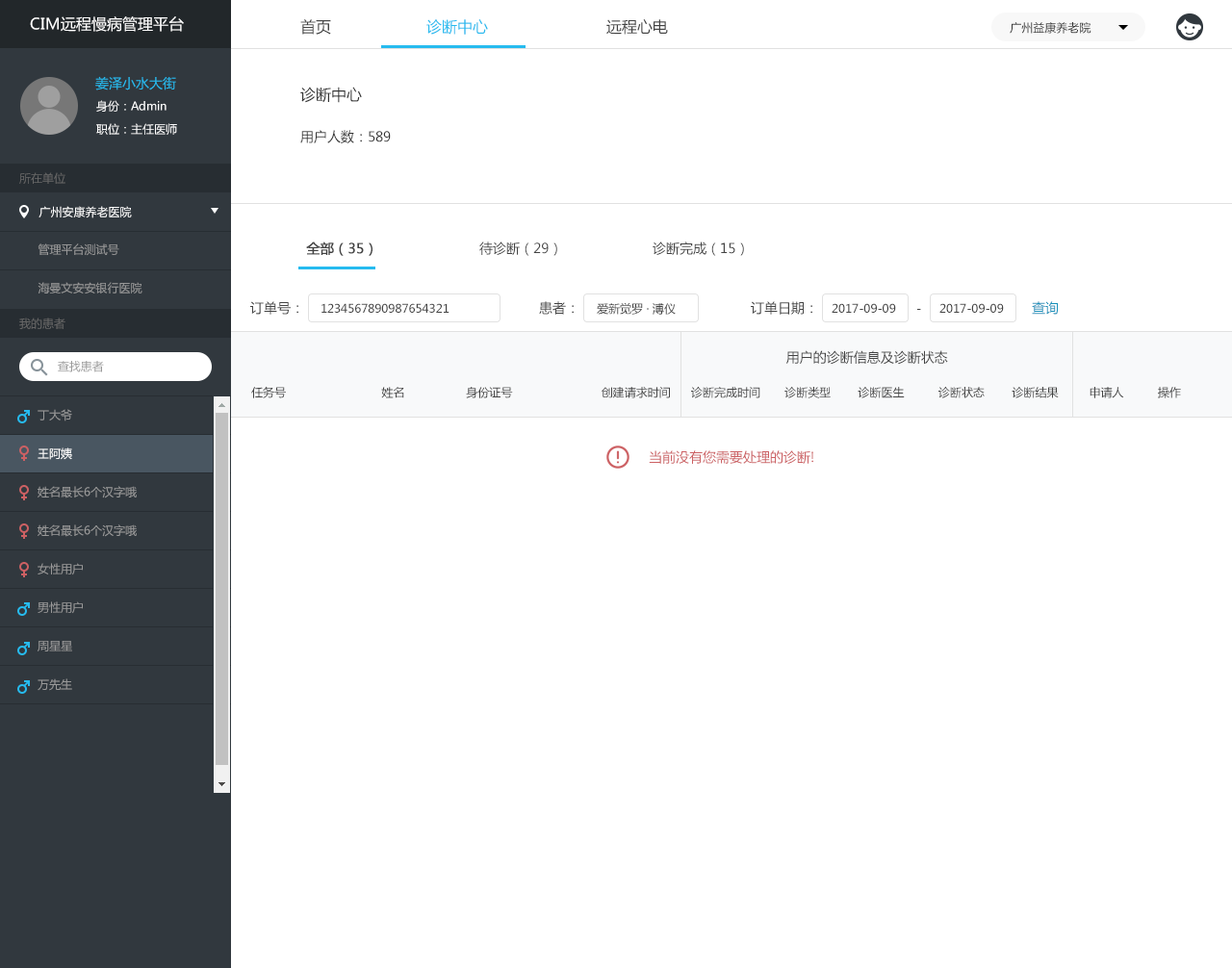
<style>
.page{position:relative;width:1232px;height:968px;background:#ffffff}
.page>*{position:absolute;margin:0}
.t1{font:15.4px "MicrosoftYaHei";color:#ffffff}
.t2{font:15.4px "MicrosoftYaHei";color:#434343}
.t3{font:15.4px "MicrosoftYaHei";color:#26bbef}
.t4{font:11.5px "MicrosoftYaHei";color:#333333}
.t5{font:13.5px "MicrosoftYaHei";color:#26bbef}
.t6{font:15.4px "MicrosoftYaHei";color:#333333}
.t7{font:11.5px "MicrosoftYaHei";color:#ffffff}
.t8{font:13.5px "MicrosoftYaHei";color:#333333}
.t9{font:11.5px "MicrosoftYaHei";color:#666666}
.t10{font:11.5px "MicrosoftYaHei";color:#999999}
.t11{font:13.5px "MicrosoftYaHei";color:#434343}
.t12{font:13.5px "MicrosoftYaHei";color:#434343;font-weight:bold}
.t13{font:11.5px "MicrosoftYaHei";color:#434343}
.t14{font:13.5px "MicrosoftYaHei";color:#1790ba}
.t15{font:11.5px/19.2px "MicrosoftYaHei";color:#999999}
.t16{font:11.5px/19.2px "MicrosoftYaHei";color:#ffffff}
.t17{font:13.5px "MicrosoftYaHei";color:#cc6063}
</style>
<div class="page">
<p class="t1" style="left:30px;top:16px;width:154px;height:16px">CIM远程慢病管理平台</p>
<p class="t2" style="left:300px;top:19px;width:31px;height:16px">首页</p>
<p class="t3" style="left:426px;top:19px;width:62px;height:16px">诊断中心</p>
<p class="t2" style="left:606px;top:19px;width:62px;height:16px">远程心电</p>
<p class="t4" style="left:1009px;top:22px;width:82px;height:12px">广州益康养老院</p>
<p class="t5" style="left:95px;top:76px;width:81px;height:14px">姜泽小水大街</p>
<p class="t6" style="left:300px;top:87px;width:62px;height:16px">诊断中心</p>
<p class="t7" style="left:96px;top:100px;width:70px;height:12px">身份：Admin</p>
<p class="t7" style="left:96px;top:123px;width:81px;height:12px">职位：主任医师</p>
<p class="t8" style="left:300px;top:130px;width:91px;height:13px">用户人数：589</p>
<p class="t9" style="left:19px;top:172px;width:46px;height:12px">所在单位</p>
<p class="t7" style="left:38px;top:206px;width:94px;height:12px">广州安康养老医院</p>
<p class="t10" style="left:38px;top:243px;width:81px;height:13px">管理平台测试号</p>
<p class="t11" style="left:306px;top:242px;width:438px;height:14px"><span class="t12">全部（35）</span>   待诊断（29）   诊断完成（15）</p>
<p class="t10" style="left:38px;top:282px;width:104px;height:12px">海曼文安安银行医院</p>
<p class="t11" style="left:250px;top:301px;width:48px;height:14px">订单号：</p>
<p class="t13" style="left:321px;top:303px;width:128px;height:10px">1234567890987654321</p>
<p class="t11" style="left:539px;top:301px;width:35px;height:14px">患者：</p>
<p class="t13" style="left:597px;top:302px;width:79px;height:13px">爱新觉罗 · 溥仪</p>
<p class="t11" style="left:751px;top:301px;width:61px;height:14px">订单日期：</p>
<p class="t13" style="left:831px;top:303px;width:65px;height:10px">2017-09-09</p>
<p class="t13" style="left:939px;top:303px;width:65px;height:10px">2017-09-09</p>
<p class="t14" style="left:1032px;top:301px;width:27px;height:14px">查询</p>
<p class="t9" style="left:19px;top:318px;width:46px;height:11px">我的患者</p>
<p class="t13" style="left:917px;top:309px;width:4px;height:1px">-</p>
<p class="t11" style="left:786px;top:350px;width:162px;height:15px">用户的诊断信息及诊断状态</p>
<p class="t10" style="left:58px;top:361px;width:46px;height:11px">查找患者</p>
<p class="t13" style="left:251px;top:386px;width:930px;height:12px">任务号                            姓名                  身份证号                          创建请求时间      诊断完成时间     诊断类型        诊断医生          诊断状态        诊断结果         申请人          操作</p>
<p class="t15" style="left:38px;top:409px;width:99px;height:282px">丁大爷<br><br><span class="t16">王阿姨<br></span><br>姓名最长6个汉字哦<br><br>姓名最长6个汉字哦<br><br>女性用户<br><br>男性用户<br><br>周星星<br><br>万先生<br><br>男女图表请区分<br><br>男性用户<br><br>男性用户<br><br>女性用户<br><br>工程师</p>
<p class="t17" style="left:649px;top:450px;width:164px;height:14px">当前没有您需要处理的诊断!</p>
</div>
